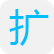
<style>
.page{position:relative;width:54px;height:54px;background:#f1f1f1}
.page>*{position:absolute;margin:0}
.t1{font:40px "MicrosoftYaHei";color:#01bfff;font-variant:small-caps}
</style>
<div class="page">
<p class="t1" style="left:9px;top:9px;width:40px;height:37px">扩</p>
</div>
